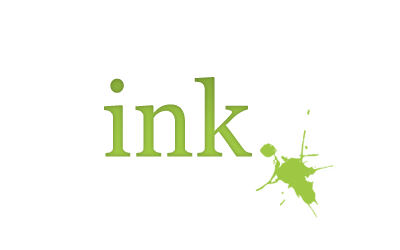
<style>
.page{position:relative;width:400px;height:250px;background:#ffffff}
.page>*{position:absolute;margin:0}
.t1{font:105px "Georgia";color:#9ec844}
</style>
<div class="page">
<p class="t1" style="left:104px;top:77px;width:148px;height:80px">ink</p>
</div>
